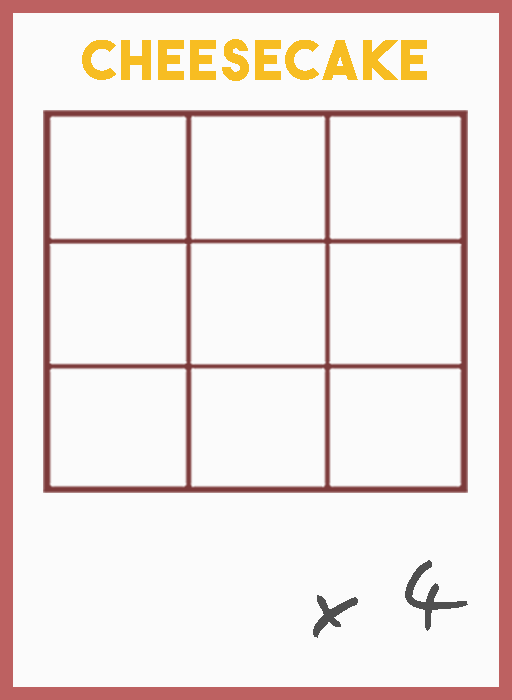
<style>
.page{position:relative;width:512px;height:700px;background:#fbfbfb}
.page>*{position:absolute;margin:0}
.t1{font:54.5px "TheBoldFont";letter-spacing:0.05em;color:#f7bd22}
.t2{font:106.1px "EasySpeech";letter-spacing:0.05em;color:#4f4f4f}
</style>
<div class="page">
<p class="t1" style="left:82px;top:39px;width:345px;height:42px">cheesecake</p>
<p class="t2" style="left:313px;top:560px;width:155px;height:78px">x 4</p>
</div>
